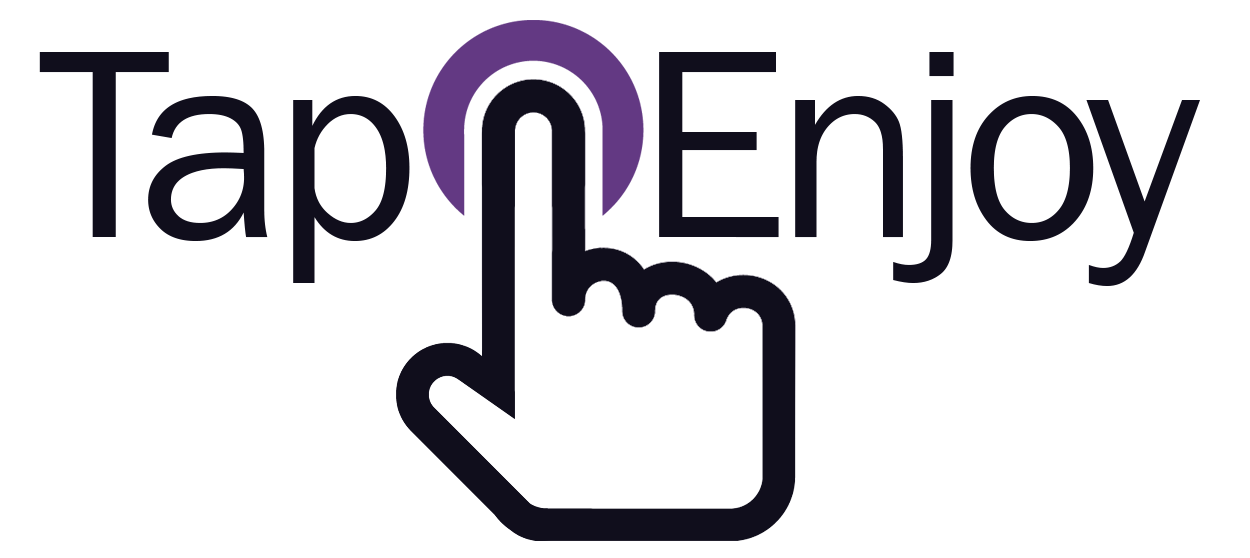
<style>
.page{position:relative;width:1250px;height:558px;background:#ffffff}
.page>*{position:absolute;margin:0}
.t1{font:277px "FranklinGothic-Book";letter-spacing:-0.05em;color:#100e1c}
.t2{font:277.6px "FranklinGothic-Book";letter-spacing:-0.05em;color:#100e1c}
</style>
<div class="page">
<p class="t1" style="left:39px;top:52px;width:371px;height:231px">Tap</p>
<p class="t1" style="left:659px;top:52px;width:541px;height:234px"><span class="t2">     </span>Enjoy</p>
</div>
